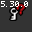
<style>
.page{position:relative;width:32px;height:32px;background:#333333}
.page>*{position:absolute;margin:0}
.t1{font:9px "Consolas";letter-spacing:-0.038em;color:#ffffff}
.t2{font:9px "Consolas";letter-spacing:0.1em;color:#ffffff}
</style>
<div class="page">
<p class="t1" style="left:1px;top:1px;width:27px;height:6px">5.<span class="t2">3</span>0.0</p>
</div>
